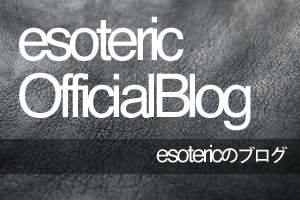
<style>
.page{position:relative;width:300px;height:200px}
.page>*{position:absolute;margin:0}
.t1{font:60px/60px "Helvetica";letter-spacing:-0.1em;color:#fefefe}
.t2{font:24px "Helvetica";letter-spacing:-0.1em;color:#fefefe}
.t3{font:18px "KozGoPr6N-Medium";letter-spacing:-0.1em;color:#fefefe}
</style>
<div class="page">
<p class="t1" style="left:19px;top:16px;width:232px;height:115px">esoteric<br>OfficialBlog</p>
<p class="t2" style="left:156px;top:144px;width:132px;height:20px">esoteric<span class="t3">のブログ</span></p>
</div>
